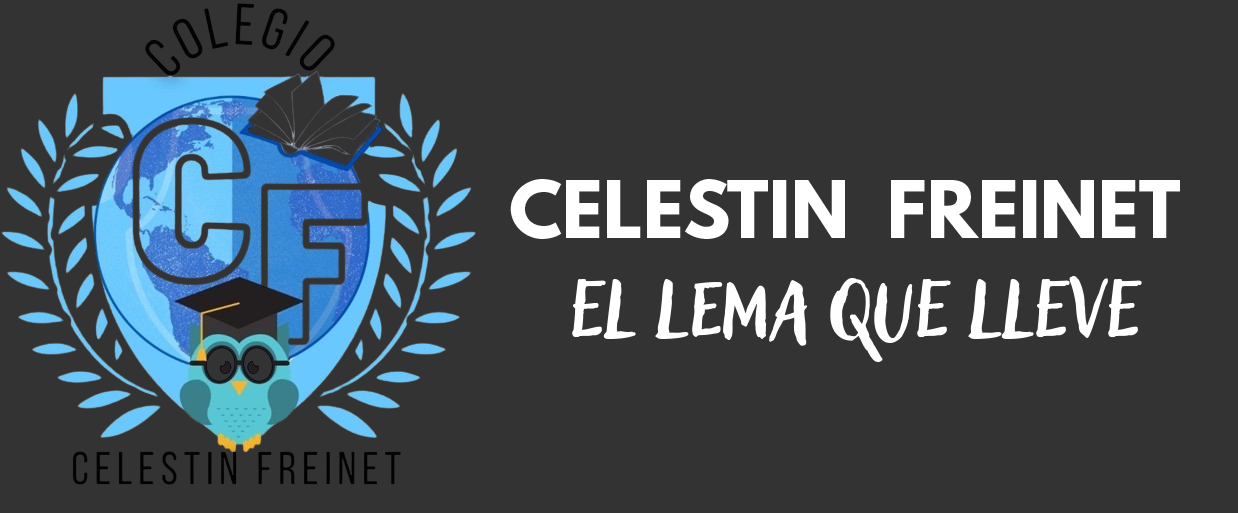
<style>
.page{position:relative;width:1238px;height:513px;background:#333333}
.page>*{position:absolute;margin:0}
.t1{font:70.4px "LeagueSpartan-Bold";color:#ffffff}
.t2{font:108.1px "AdleryPro-Blockletter";color:#ffffff;scale:0.96 1}
</style>
<div class="page">
<p class="t1" style="left:510px;top:179px;width:670px;height:60px">CELESTIN  FREINET</p>
<p class="t2" style="left:572px;top:276px;width:570px;height:86px">EL LEMA QUE LLEVE</p>
</div>
